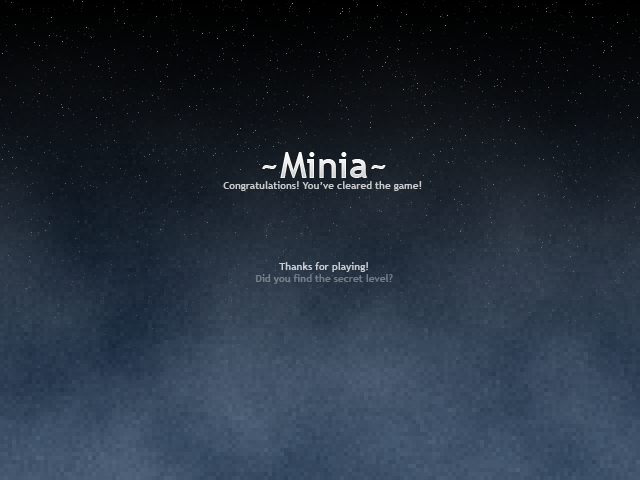
<style>
.page{position:relative;width:640px;height:480px}
.page>*{position:absolute;margin:0}
.t1{font:36px "TrebuchetMS-Bold";color:#ffffff}
.t2{font:10px "TrebuchetMS-Bold";color:#c6c8ca}
.t3{font:10px "TrebuchetMS-Bold";color:#c9ccd0}
.t4{font:10px "TrebuchetMS-Bold";color:#747c87}
</style>
<div class="page">
<p class="t1" style="left:262px;top:152px;width:124px;height:26px">~Minia~</p>
<p class="t2" style="left:223px;top:181px;width:199px;height:10px">Congratulations! You’ve cleared the game!</p>
<p class="t3" style="left:279px;top:262px;width:89px;height:10px">Thanks for playing!</p>
<p class="t4" style="left:256px;top:274px;width:137px;height:10px">Did you find the secret level?</p>
</div>
